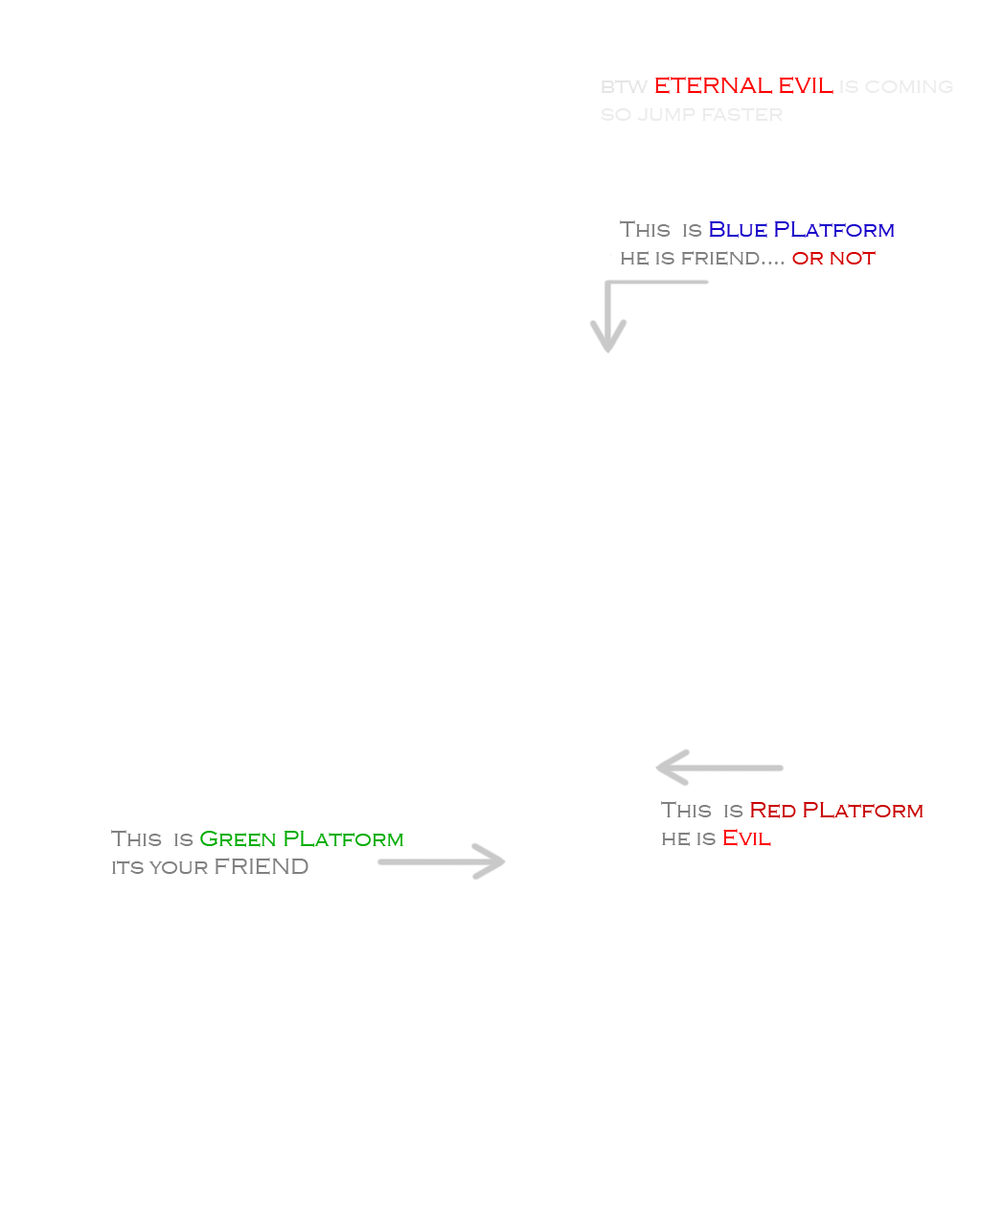
<style>
.page{position:relative;width:981px;height:1215px;background:#ffffff}
.page>*{position:absolute;margin:0}
.t1{font:23px "CopperplateGothic-Light";color:#ececec}
.t2{font:23px "CopperplateGothic-Light";color:#e5e5e5}
.t3{font:23px "CopperplateGothic-Light";color:#ff0000}
.t4{font:23px "CopperplateGothic-Light";color:#808080}
.t5{font:23px "CopperplateGothic-Light";color:#1800c9}
.t6{font:23px "CopperplateGothic-Light";color:#d50000}
.t7{font:23px "CopperplateGothic-Light";color:#c90000}
.t8{font:23px "CopperplateGothic-Light";color:#ff0006}
.t9{font:23px "CopperplateGothic-Light";color:#00ad00}
</style>
<div class="page">
<p class="t1" style="left:601px;top:77px;width:353px;height:45px"><span class="t2">btw </span><span class="t3">ETERNAL EVIL</span> is coming<br>so jump faster</p>
<p class="t4" style="left:620px;top:220px;width:275px;height:45px">This  is <span class="t5">Blue PLatform<br></span>he is friend.... <span class="t6">or not</span></p>
<p class="t7" style="left:661px;top:801px;width:263px;height:45px"><span class="t4">This  is </span>Red PLatform<br><span class="t4">he is</span><span class="t8"> Evil</span></p>
<p class="t4" style="left:111px;top:830px;width:292px;height:45px">This  is <span class="t9">Green PLatform<br></span>its your FRIEND</p>
</div>
